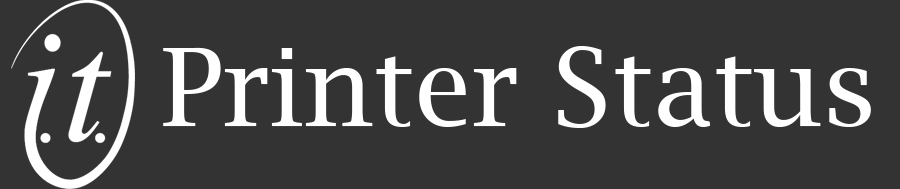
<style>
.page{position:relative;width:900px;height:189px;background:#333333}
.page>*{position:absolute;margin:0}
.t1{font:25.9px "LucidaBright";color:#ffffff}
</style>
<div class="page">
<p class="t1" style="left:163px;top:46px;width:708px;height:82px">Printer Status</p>
</div>
